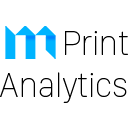
<style>
.page{position:relative;width:128px;height:128px;background:#ffffff}
.page>*{position:absolute;margin:0}
.t1{font:34.7px "SanFranciscoDisplay-Ultralight";color:#000000}
</style>
<div class="page">
<p class="t1" style="left:0px;top:31px;width:128px;height:72px;text-align:right">Print<br>Analytics</p>
</div>
